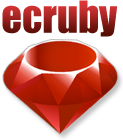
<style>
.page{position:relative;width:123px;height:140px;background:#ffffff}
.page>*{position:absolute;margin:0}
.t1{font:40.7px "Impact"}
</style>
<div class="page">
<p class="t1" style="left:2px;top:0px;width:116px;height:37px">ecruby</p>
</div>
